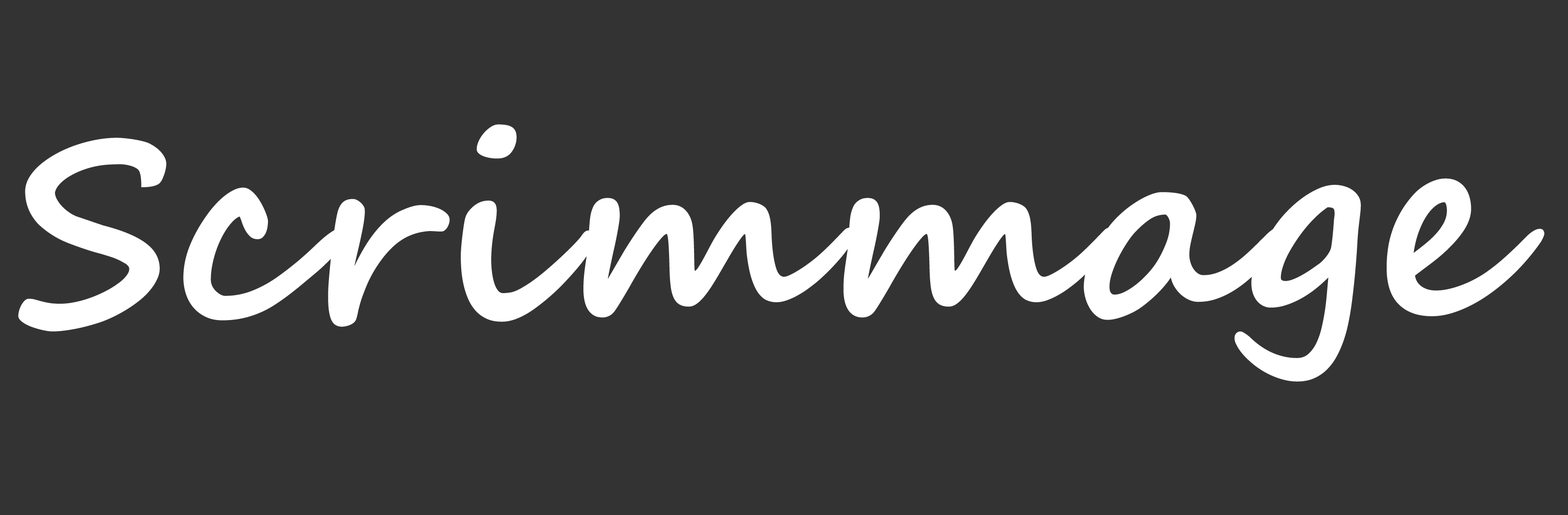
<style>
.page{position:relative;width:1568px;height:515px;background:#333333}
.page>*{position:absolute;margin:0}
.t1{font:255.5px "SegoeScript-Bold";color:#ffffff}
</style>
<div class="page">
<p class="t1" style="left:18px;top:124px;width:1526px;height:257px">Scrimmage</p>
</div>
